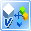
<style>
.page{position:relative;width:31px;height:31px}
.page>*{position:absolute;margin:0}
.t1{font:11px "Gulim";color:#024ec1;font-weight:bold;font-style:italic}
</style>
<div class="page">
<p class="t1" style="left:5px;top:18px;width:7px;height:8px">V</p>
</div>
